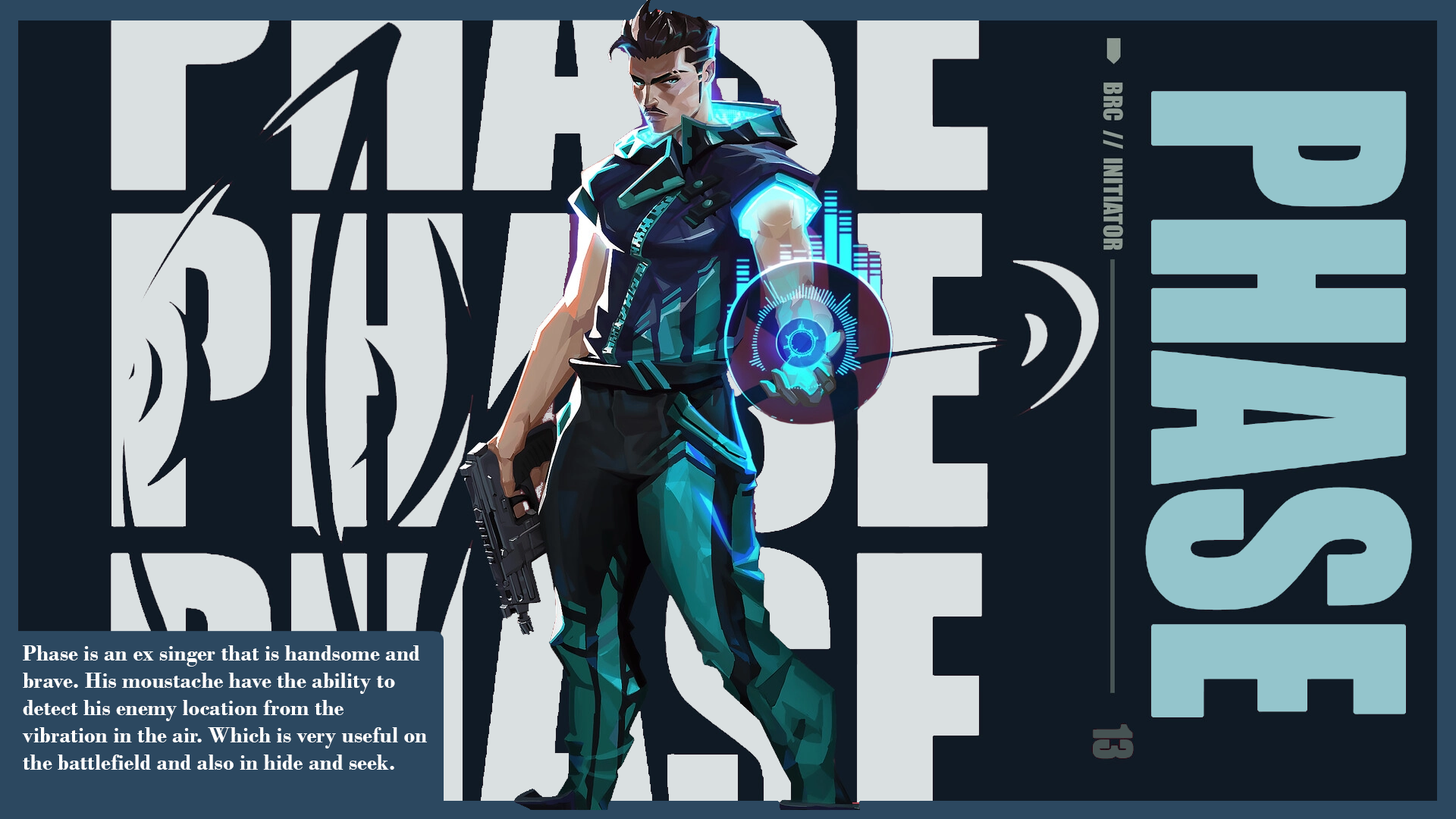
<style>
.page{position:relative;width:1456px;height:819px;background:#101a25}
.page>*{position:absolute;margin:0}
.t1{font:22.7px "BodoniMT-Bold";color:#ffffff}
</style>
<div class="page">
<p class="t1" style="left:22px;top:645px;width:405px;height:125px">Phase is an ex singer that is handsome and brave. His moustache have the ability to detect his enemy location from the vibration in the air. Which is very useful on the battlefield and also in hide and seek.</p>
</div>
